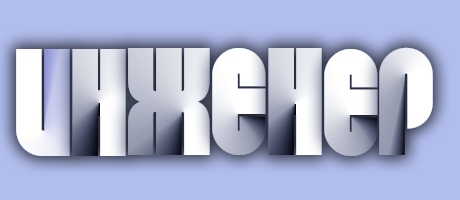
<style>
.page{position:relative;width:460px;height:200px;background:#b1bded}
.page>*{position:absolute;margin:0}
.t1{font:150px "Dan"}
</style>
<div class="page">
<p class="t1" style="left:16px;top:49px;width:54px;height:107px">И</p>
<p class="t1" style="left:128px;top:48px;width:82px;height:107px">Ж</p>
<p class="t1" style="left:212px;top:47px;width:54px;height:108px">Е</p>
<p class="t1" style="left:268px;top:48px;width:54px;height:107px">Н</p>
<p class="t1" style="left:324px;top:48px;width:54px;height:108px">Е</p>
<p class="t1" style="left:379px;top:47px;width:54px;height:108px">Р</p>
</div>
